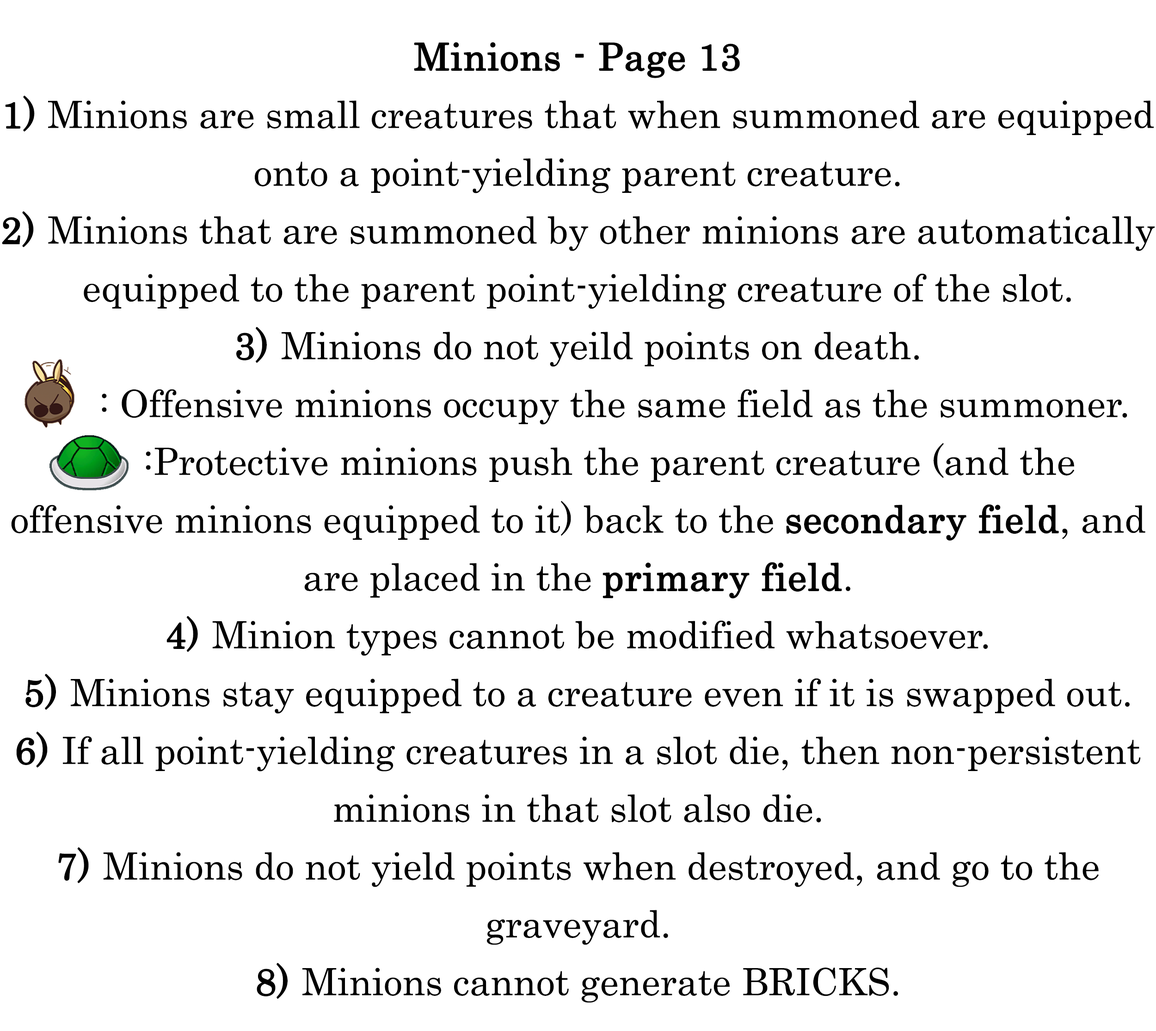
<style>
.page{position:relative;width:1156px;height:1031px;background:#ffffff}
.page>*{position:absolute;margin:0}
.t1{font:64.2px/57.8px "Century";color:#000000}
.t2{font:64.2px/57.8px "Century";color:#000000;font-weight:bold}
</style>
<div class="page">
<p class="t1" style="left:2px;top:42px;width:1154px;height:961px;text-align:center"><span class="t2">Minions - Page 13<br>1)</span> Minions are small creatures that when summoned are equipped onto a point-yielding parent creature.<br><span class="t2">2) </span>Minions that are summoned by other minions are automatically equipped to the parent point-yielding creature of the slot.<br><span class="t2">3) </span>Minions do not yeild points on death.<br>       : Offensive minions occupy the same field as the summoner.<br>      :Protective minions push the parent creature (and the offensive minions equipped to it) back to the <span class="t2">secondary field</span>, and are placed in the <span class="t2">primary field</span>.<br><span class="t2">4) </span>Minion types cannot be modified whatsoever.<br><span class="t2">5) </span>Minions stay equipped to a creature even if it is swapped out.<br><span class="t2">6) </span>If all point-yielding creatures in a slot die, then non-persistent minions in that slot also die.<br><span class="t2">7) </span>Minions do not yield points when destroyed, and go to the graveyard.<br><span class="t2">8) </span>Minions cannot generate BRICKS.</p>
</div>
